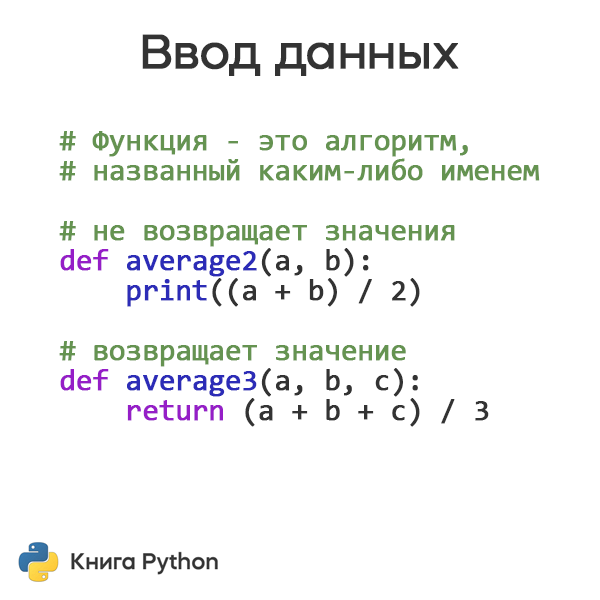
<style>
.page{position:relative;width:600px;height:600px;background:#ffffff}
.page>*{position:absolute;margin:0}
.t1{font:48px "MazzardH-Regular";letter-spacing:-0.025em;color:#333333;font-weight:bold}
.t2{font:30px/30px "Consolas";letter-spacing:-0.025em;color:#659351;font-weight:bold}
.t3{font:30px/30px "Consolas";letter-spacing:-0.025em;color:#951ec7;font-weight:bold}
.t4{font:30px/30px "Consolas";letter-spacing:-0.025em;color:#2c2cb7;font-weight:bold}
.t5{font:30px/30px "Consolas";letter-spacing:-0.025em;color:#333333;font-weight:bold}
</style>
<div class="page">
<p class="t1" style="left:142px;top:34px;width:317px;height:42px">Ввод данных</p>
<p class="t2" style="left:59px;top:131px;width:481px;height:296px"># Функция - это алгоритм,<br># названный каким-либо именем<br><br># не возвращает значения<br><span class="t3">def </span><span class="t4">average2</span><span class="t5">(a, b):<br>    </span><span class="t4">print</span><span class="t5">((a + b) / 2)<br><br></span># возвращает значение<br><span class="t3">def </span><span class="t4">average3</span><span class="t5">(a, b, c):<br>    </span><span class="t3">return</span><span class="t5"> (a + b + c) / 3</span></p>
</div>
